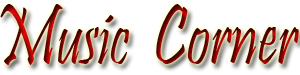
<style>
.page{position:relative;width:300px;height:75px;background:#ffffff}
.page>*{position:absolute;margin:0}
.t1{font:87.3px "Pristina-Regular";scale:0.75 1}
</style>
<div class="page">
<p class="t1" style="left:0px;top:4px;width:299px;height:61px">Music  Corner</p>
</div>
